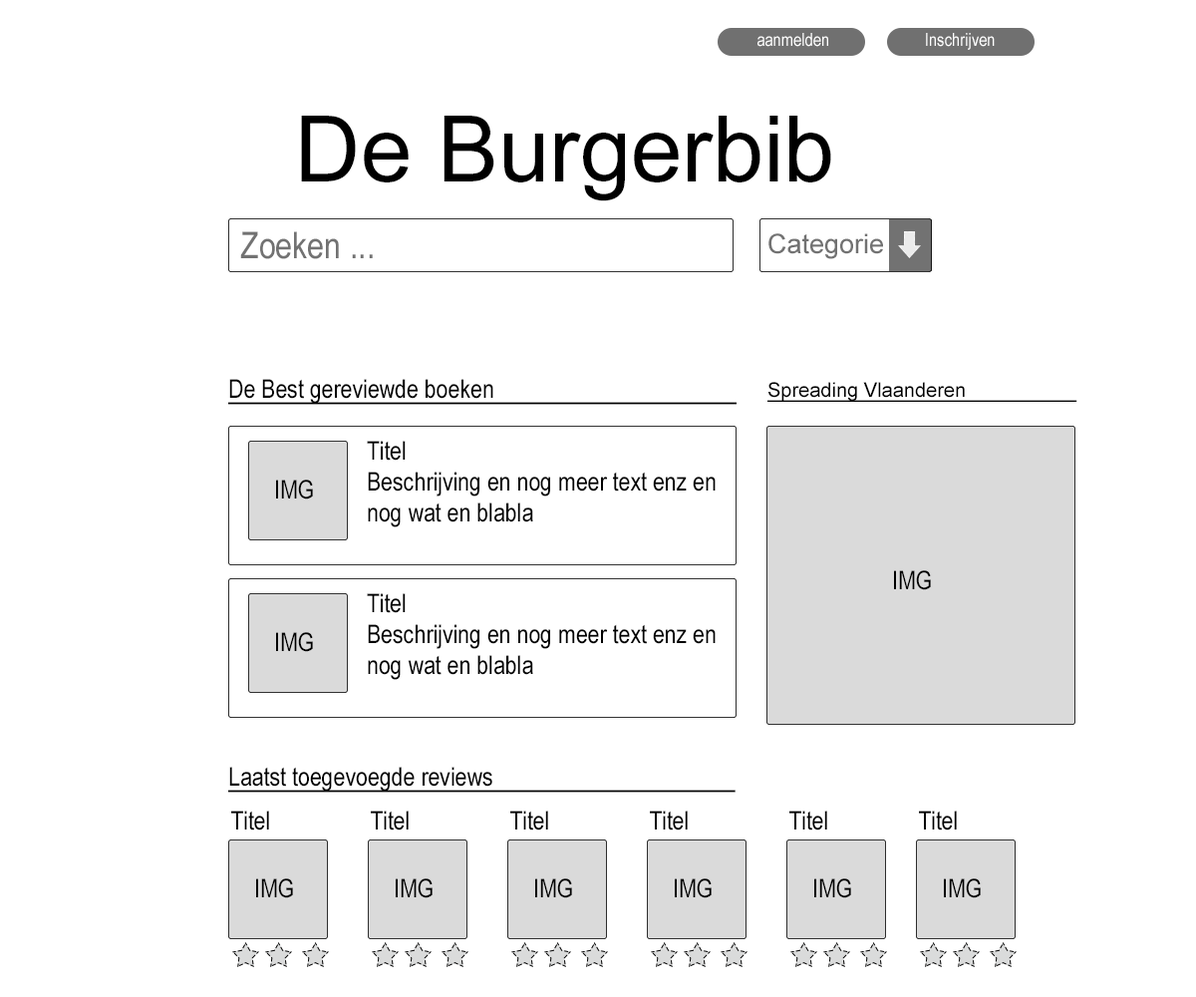
<style>
.page{position:relative;width:1196px;height:997px;background:#ffffff}
.page>*{position:absolute;margin:0}
.t1{font:17.9px "ArialNarrow";color:#ffffff}
.t2{font:91.7px "ArialMT";color:#000000}
.t3{font:36.9px "ArialNarrow";color:#727272}
.t4{font:26.9px "ArialMT";color:#727272}
.t5{font:25.9px "ArialNarrow";color:#000000;text-decoration:underline}
.t6{font:19.9px "ArialMT";color:#000000;text-decoration:underline}
.t7{font:25.9px "ArialNarrow";color:#000000}
</style>
<div class="page">
<p class="t1" style="left:758px;top:33px;width:70px;height:14px">aanmelden</p>
<p class="t1" style="left:926px;top:33px;width:69px;height:17px">Inschrijven</p>
<p class="t2" style="left:301px;top:116px;width:530px;height:85px">De Burgerbib</p>
<p class="t3" style="left:240px;top:231px;width:133px;height:28px">Zoeken ...</p>
<p class="t4" style="left:769px;top:233px;width:114px;height:26px">Categorie</p>
<p class="t5" style="left:228px;top:379px;width:509px;height:26px">De Best gereviewde boeken</p>
<p class="t6" style="left:768px;top:382px;width:310px;height:20px">Spreading Vlaanderen</p>
<p class="t7" style="left:367px;top:441px;width:349px;height:86px">Titel<br>Beschrijving en nog meer text enz en nog wat en blabla</p>
<p class="t7" style="left:276px;top:479px;width:37px;height:20px">IMG</p>
<p class="t7" style="left:894px;top:570px;width:37px;height:20px">IMG</p>
<p class="t7" style="left:367px;top:593px;width:349px;height:87px">Titel<br>Beschrijving en nog meer text enz en nog wat en blabla</p>
<p class="t7" style="left:276px;top:632px;width:37px;height:20px">IMG</p>
<p class="t5" style="left:228px;top:767px;width:508px;height:25px">Laatst toegevoegde reviews</p>
<p class="t7" style="left:231px;top:810px;width:38px;height:20px">Titel</p>
<p class="t7" style="left:371px;top:810px;width:38px;height:20px">Titel</p>
<p class="t7" style="left:510px;top:810px;width:38px;height:20px">Titel</p>
<p class="t7" style="left:650px;top:810px;width:38px;height:20px">Titel</p>
<p class="t7" style="left:789px;top:810px;width:38px;height:20px">Titel</p>
<p class="t7" style="left:919px;top:810px;width:38px;height:20px">Titel</p>
<p class="t7" style="left:256px;top:878px;width:37px;height:20px">IMG</p>
<p class="t7" style="left:396px;top:878px;width:37px;height:20px">IMG</p>
<p class="t7" style="left:535px;top:878px;width:37px;height:20px">IMG</p>
<p class="t7" style="left:675px;top:878px;width:37px;height:20px">IMG</p>
<p class="t7" style="left:814px;top:878px;width:37px;height:20px">IMG</p>
<p class="t7" style="left:944px;top:878px;width:37px;height:20px">IMG</p>
</div>
